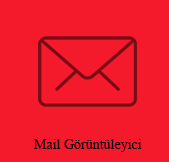
<style>
.page{position:relative;width:169px;height:162px;background:#f4192b}
.page>*{position:absolute;margin:0}
.t1{font:14px "TimesNewRomanPSMT";color:#060606}
</style>
<div class="page">
<p class="t1" style="left:34px;top:139px;width:108px;height:13px">Mail Görüntüleyici</p>
</div>
